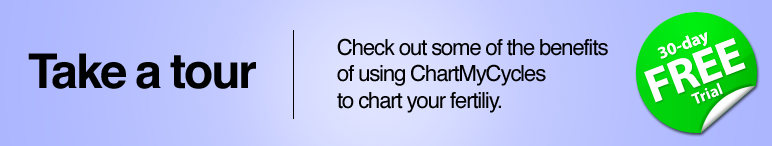
<style>
.page{position:relative;width:772px;height:146px}
.page>*{position:absolute;margin:0}
.t1{font:22px "Helvetica";letter-spacing:-0.05em;color:#000000}
.t2{font:48px "MyriadPro-Bold";letter-spacing:-0.025em;color:#ffffff}
.t3{font:17.2px "MyriadPro-Bold";color:#ffffff}
.t4{font:48px "Helvetica-Bold";letter-spacing:-0.05em;color:#000000}
.t5{font:16.2px "MyriadPro-Bold";color:#ffffff}
</style>
<div class="page">
<p class="t1" style="left:337px;top:38px;width:271px;height:75px">Check out some of the benefits<br>of using ChartMyCycles<br>to chart your fertiliy.</p>
<p class="t2" style="left:644px;top:38px;width:102px;height:65px;rotate:-21deg">FREE</p>
<p class="t3" style="left:657px;top:32px;width:50px;height:27px;rotate:-21deg">30-day</p>
<p class="t4" style="left:28px;top:53px;width:228px;height:36px">Take a tour</p>
<p class="t5" style="left:691px;top:82px;width:32px;height:22px;rotate:-22deg">Trial</p>
</div>
